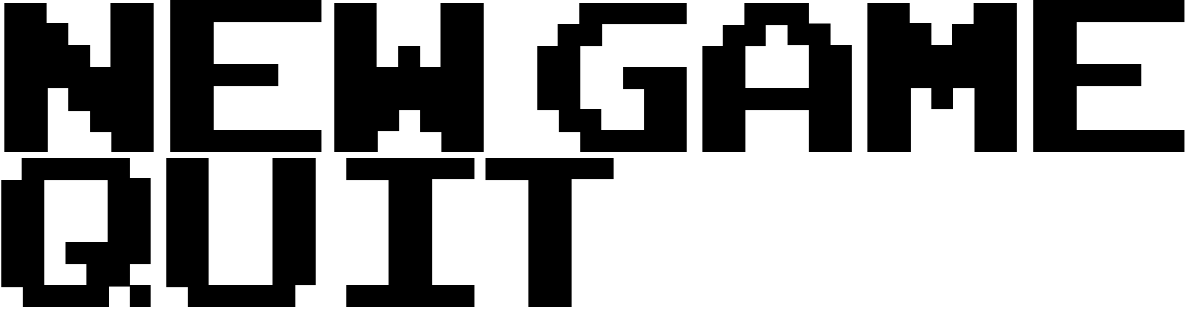
<style>
.page{position:relative;width:1186px;height:315px;background:#ffffff}
.page>*{position:absolute;margin:0}
.t1{font:300px "ArcadeClassic";color:#000000}
</style>
<div class="page">
<p class="t1" style="left:4px;top:0px;width:1181px;height:152px">New Game</p>
<p class="t1" style="left:1px;top:158px;width:613px;height:149px">quit</p>
</div>
